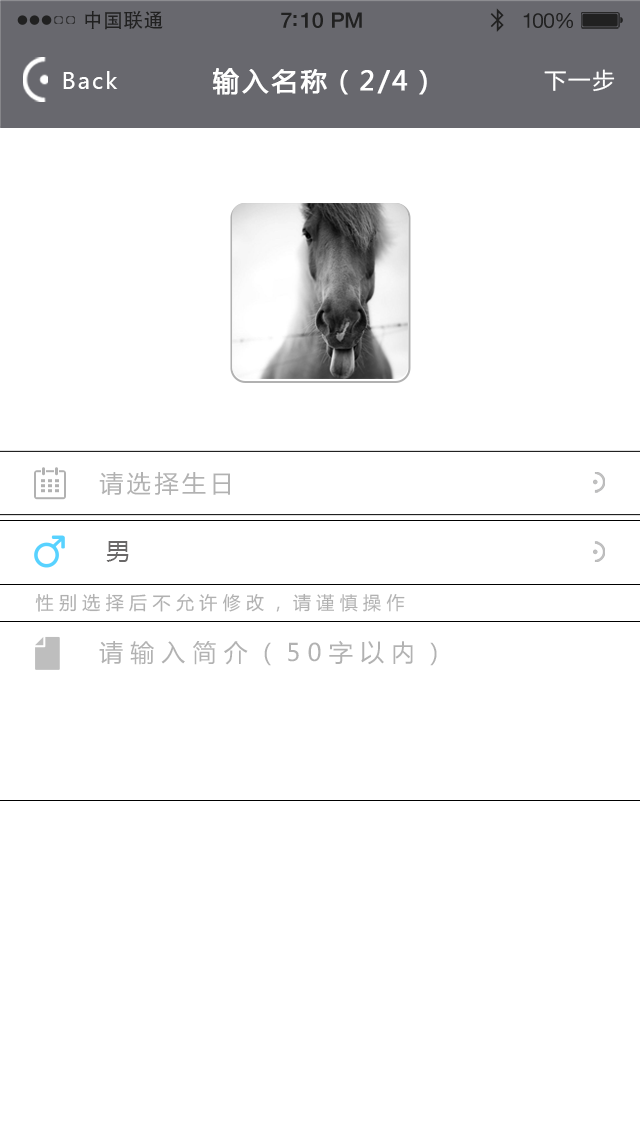
<style>
.page{position:relative;width:640px;height:1136px;background:#ffffff}
.page>*{position:absolute;margin:0}
.t1{font:19.7px "AdobeHeitiStd-Regular";letter-spacing:0.02em;color:#212121}
.t2{font:21.4px "HelveticaNeue-Medium";letter-spacing:-0.02em;color:#212121}
.t3{font:20.6px "HelveticaNeue";letter-spacing:-0.02em;color:#212121}
.t4{font:22px "MicrosoftYaHei";letter-spacing:0.1em;color:#ffffff}
.t5{font:26px "MicrosoftYaHei";letter-spacing:0.1em;color:#ffffff;font-weight:bold}
.t6{font:24px "MicrosoftYaHei";letter-spacing:0.15em;color:#b2b2b2}
.t7{font:24px "MicrosoftYaHei";letter-spacing:0.15em;color:#6a6868}
.t8{font:18px "MicrosoftYaHei";letter-spacing:0.3em;color:#b1b1b1}
.t9{font:24px "MicrosoftYaHei";letter-spacing:0.3em;color:#b2b2b2}
</style>
<div class="page">
<p class="t1" style="left:85px;top:10px;width:78px;height:20px">中国联通</p>
<p class="t2" style="left:281px;top:12px;width:81px;height:16px">7:10 PM</p>
<p class="t3" style="left:523px;top:13px;width:50px;height:16px">100%</p>
<p class="t4" style="left:63px;top:71px;width:55px;height:18px">Back</p>
<p class="t5" style="left:212px;top:68px;width:215px;height:27px">输入名称（2/4）</p>
<p class="t4" style="left:544px;top:69px;width:71px;height:23px">下一步</p>
<p class="t6" style="left:99px;top:472px;width:131px;height:23px">请选择生日</p>
<p class="t7" style="left:106px;top:541px;width:23px;height:21px">男</p>
<p class="t8" style="left:35px;top:593px;width:370px;height:19px">性别选择后不允许修改，请谨慎操作</p>
<p class="t9" style="left:99px;top:640px;width:338px;height:26px">请输入简介（50字以内）</p>
</div>
